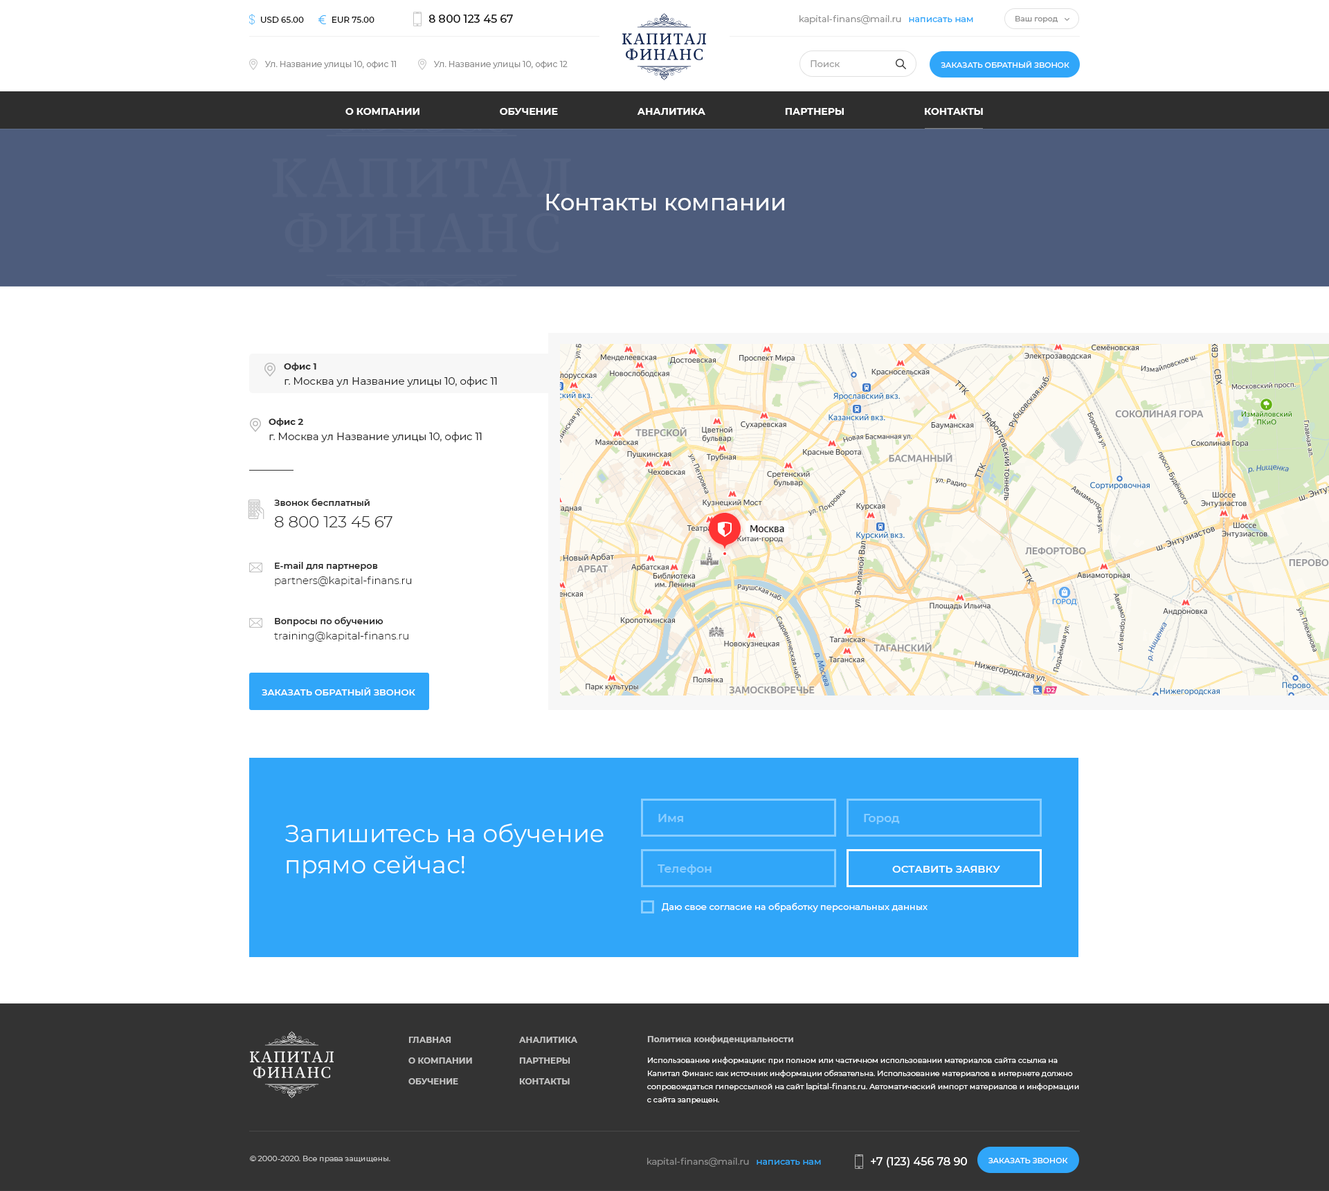
<style>
.page{position:relative;width:1329px;height:1191px;background:#ffffff}
.page>*{position:absolute;margin:0}
.t1{font:8.3px "Montserrat-Medium";color:#191919}
.t2{font:11.1px "Montserrat-Medium";color:#191919}
.t3{font:9px "Montserrat-Regular";color:#909090}
.t4{font:9px "Montserrat-Medium";color:#30a6f9}
.t5{font:7.6px "Montserrat-Medium";color:#909090}
.t6{font:8.3px "Montserrat-Regular";color:#8a8a8a}
.t7{font:9px "Montserrat-Medium";color:#a1a1a1}
.t8{font:7.6px "Montserrat-Medium";color:#ffffff}
.t9{font:9.7px "Montserrat-Bold";color:#ffffff}
.t10{font:22.8px "Montserrat-Medium";color:#ffffff}
.t11{font:10.4px/15.2px "Montserrat-Regular";color:#2c2c2c}
.t12{font:9px/21.5px "Montserrat-Bold";color:#2c2c2c}
.t13{font:9px/21.5px "Montserrat-SemiBold";color:#222222}
.t14{font:15.9px/21.5px "Montserrat-Light";color:#212121}
.t15{font:10.4px/15.2px "Montserrat-Light";color:#212121}
.t16{font:9px/21.5px "Montserrat-SemiBold";color:#212121}
.t17{font:9px "Montserrat-SemiBold";color:#ffffff}
.t18{font:11.8px "Montserrat-SemiBold";color:#89ceff}
.t19{font:24.2px/31.2px "Montserrat-Regular";color:#ffffff}
.t20{font:10.4px "Montserrat-SemiBold";color:#ffffff}
.t21{font:9px "Montserrat-Medium";color:#ffffff}
.t22{font:8.3px/20.8px "Montserrat-Bold";color:#c3c3c3}
.t23{font:7.6px/13.2px "Montserrat-Regular";color:#ffffff}
.t24{font:7.6px/20.8px "Montserrat-Regular";color:#ffffff}
.t25{font:7.6px "Montserrat-Regular";color:#c3c3c3}
.t26{font:11.1px "Montserrat-Medium";color:#ffffff}
</style>
<div class="page">
<p class="t1" style="left:261px;top:17px;width:43px;height:6px">USD 65.00</p>
<p class="t1" style="left:332px;top:17px;width:43px;height:6px">EUR 75.00</p>
<p class="t2" style="left:429px;top:15px;width:84px;height:8px">8 800 123 45 67</p>
<p class="t3" style="left:800px;top:15px;width:173px;height:9px">kapital-finans@mail.ru   <span class="t4">написать нам</span></p>
<p class="t5" style="left:1016px;top:16px;width:42px;height:7px">Ваш город</p>
<p class="t6" style="left:265px;top:61px;width:131px;height:8px">Ул. Название улицы 10, офис 11</p>
<p class="t6" style="left:434px;top:61px;width:134px;height:8px">Ул. Название улицы 10, офис 12</p>
<p class="t7" style="left:811px;top:60px;width:29px;height:7px">Поиск</p>
<p class="t8" style="left:941px;top:61px;width:129px;height:7px">ЗАКАЗАТЬ ОБРАТНЫЙ ЗВОНОК</p>
<p class="t9" style="left:345px;top:108px;width:638px;height:7px">О КОМПАНИИ                             ОБУЧЕНИЕ                             АНАЛИТИКА                             ПАРТНЕРЫ                             КОНТАКТЫ</p>
<p class="t10" style="left:546px;top:194px;width:238px;height:16px">Контакты компании</p>
<p class="t11" style="left:284px;top:363px;width:213px;height:24px"><span class="t12">Офис 1<br></span>г. Москва ул Название улицы 10, офис 11</p>
<p class="t11" style="left:269px;top:418px;width:213px;height:24px"><span class="t12">Офис 2<br></span>г. Москва ул Название улицы 10, офис 11</p>
<p class="t13" style="left:274px;top:498px;width:119px;height:30px">Звонок бесплатный<br><span class="t14">8 800 123 45 67</span></p>
<p class="t15" style="left:275px;top:562px;width:137px;height:24px"><span class="t16">E-mail для партнеров<br></span>partners@kapital-finans.ru</p>
<p class="t15" style="left:274px;top:617px;width:134px;height:25px"><span class="t16">Вопросы по обучению<br></span>training@kapital-finans.ru</p>
<p class="t17" style="left:262px;top:687px;width:153px;height:9px">ЗАКАЗАТЬ ОБРАТНЫЙ ЗВОНОК</p>
<p class="t18" style="left:658px;top:814px;width:25px;height:8px">Имя</p>
<p class="t18" style="left:864px;top:814px;width:36px;height:11px">Город</p>
<p class="t19" style="left:285px;top:823px;width:319px;height:56px">Запишитесь на обучение<br>прямо сейчас!</p>
<p class="t18" style="left:658px;top:865px;width:54px;height:10px">Телефон</p>
<p class="t20" style="left:892px;top:866px;width:108px;height:7px">ОСТАВИТЬ ЗАЯВКУ</p>
<p class="t21" style="left:662px;top:903px;width:266px;height:9px">Даю свое согласие на обработку персональных данных</p>
<p class="t22" style="left:408px;top:1037px;width:64px;height:48px">ГЛАВНАЯ<br>О КОМПАНИИ<br>ОБУЧЕНИЕ</p>
<p class="t22" style="left:519px;top:1037px;width:58px;height:48px">АНАЛИТИКА<br>ПАРТНЕРЫ<br>КОНТАКТЫ</p>
<p class="t23" style="left:647px;top:1036px;width:432px;height:68px"><span class="t22">Политика конфиденциальности <br></span><span class="t24">Использование информации: при полном или частичном использовании материалов сайта ссылка на<br></span>Капитал Финанс как источник информации обязательна. Использование материалов в интернете должно<br>сопровождаться гиперссылкой на сайт lapital-finans.ru. Автоматический импорт материалов и информации<br>с сайта запрещен.</p>
<p class="t25" style="left:250px;top:1156px;width:140px;height:7px">© 2000-2020. Все права защищены.</p>
<p class="t26" style="left:871px;top:1158px;width:96px;height:10px">+7 (123) 456 78 90</p>
<p class="t3" style="left:647px;top:1158px;width:174px;height:9px">kapital-finans@mail.ru   <span class="t4">написать нам</span></p>
<p class="t8" style="left:989px;top:1158px;width:79px;height:6px">ЗАКАЗАТЬ ЗВОНОК</p>
</div>
